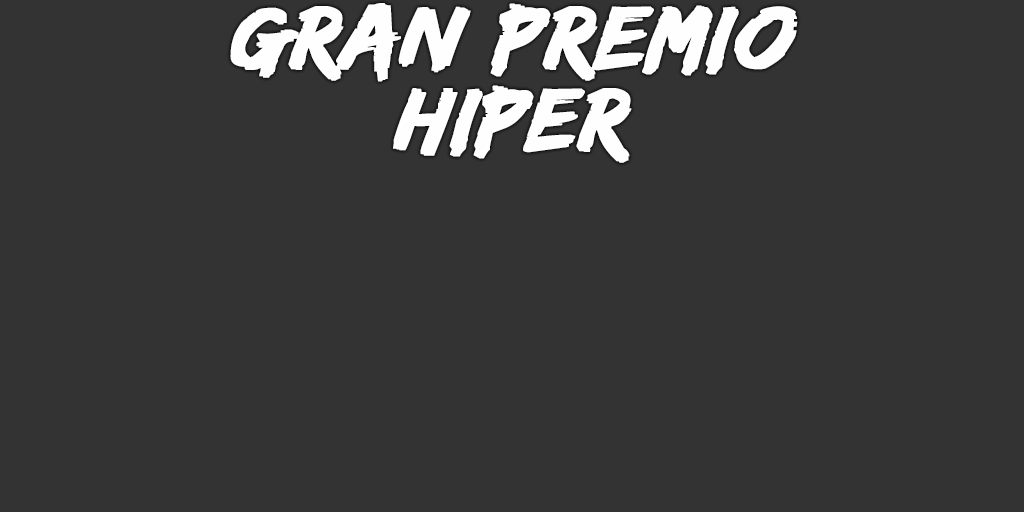
<style>
.page{position:relative;width:1024px;height:512px;background:#333333}
.page>*{position:absolute;margin:0}
.t1{font:93px/82px "EdoSZ";color:#fefefe;font-weight:bold;font-style:italic;scale:1.04 1}
</style>
<div class="page">
<p class="t1" style="left:230px;top:3px;width:568px;height:160px;text-align:center">gran premio<br>hiper</p>
</div>
